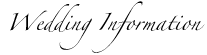
<style>
.page{position:relative;width:207px;height:55px;background:#ffffff}
.page>*{position:absolute;margin:0}
.t1{font:15.3px "Zapfino";color:#000000}
</style>
<div class="page">
<p class="t1" style="left:10px;top:1px;width:195px;height:52px;text-align:center">Wedding Information</p>
</div>
